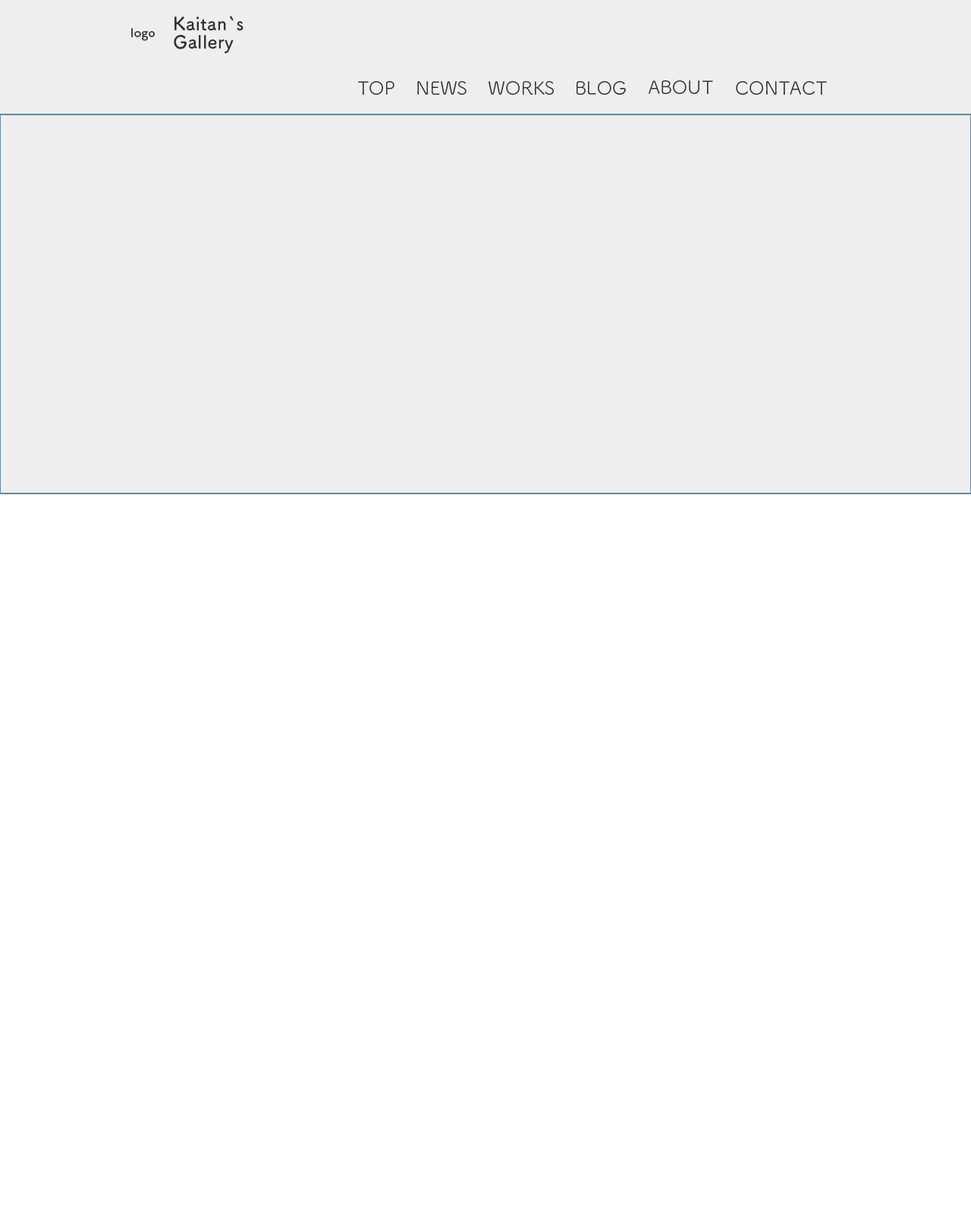
<style>
.page{position:relative;width:971px;height:1228px;background:#ffffff}
.page>*{position:absolute;margin:0}
.t1{font:18.2px/18.2px "TsukuARdGothic-Bold";color:#333333}
.t2{font:12.1px "TsukuARdGothic-Bold";color:#333333}
.t3{font:18.2px "TsukuARdGothic-Regular";color:#333333}
</style>
<div class="page">
<p class="t1" style="left:174px;top:16px;width:69px;height:38px">Kaitan`s<br>Gallery</p>
<p class="t2" style="left:131px;top:28px;width:24px;height:13px">logo</p>
<p class="t3" style="left:358px;top:81px;width:36px;height:14px">TOP</p>
<p class="t3" style="left:417px;top:81px;width:49px;height:14px">NEWS</p>
<p class="t3" style="left:488px;top:81px;width:66px;height:15px">WORKS</p>
<p class="t3" style="left:576px;top:81px;width:50px;height:14px">BLOG</p>
<p class="t3" style="left:648px;top:80px;width:65px;height:14px">ABOUT</p>
<p class="t3" style="left:736px;top:81px;width:91px;height:14px">CONTACT</p>
</div>
